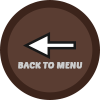
<style>
.page{position:relative;width:100px;height:100px;background:#5a3d32}
.page>*{position:absolute;margin:0}
.t1{font:9px "PoetsenOne-Regular";color:#cccccc;font-weight:bold}
</style>
<div class="page">
<p class="t1" style="left:18px;top:62px;width:65px;height:7px">BACK TO MENU</p>
</div>
